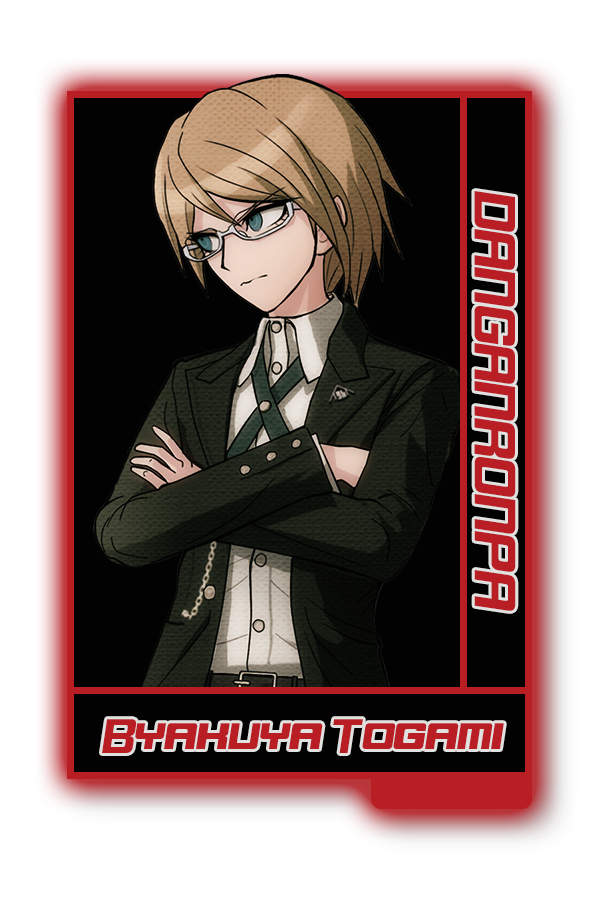
<style>
.page{position:relative;width:600px;height:900px;background:#020202}
.page>*{position:absolute;margin:0}
.t1{font:48.8px "DorBlue";color:#bb2c2e}
.t2{font:40.6px "DorBlue";color:#bb2c2e}
</style>
<div class="page">
<p class="t1" style="left:474px;top:191px;width:42px;height:420px;rotate:90deg">DANGANRONPA</p>
<p class="t2" style="left:102px;top:719px;width:402px;height:34px">Byakuya Togami</p>
</div>
